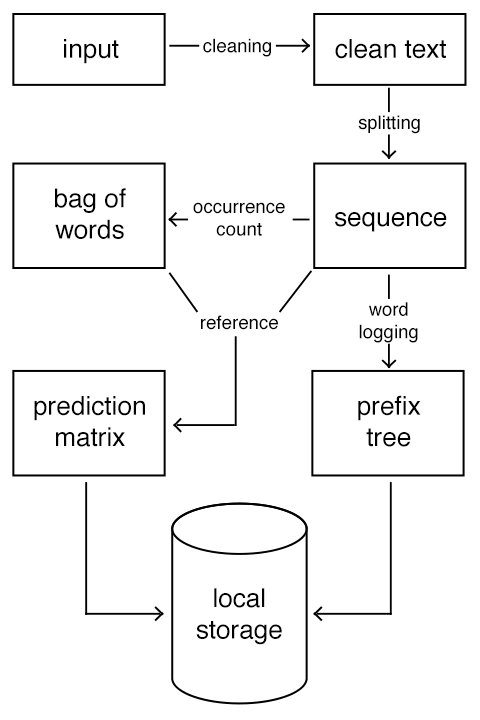
<style>
.page{position:relative;width:480px;height:720px;background:#ffffff}
.page>*{position:absolute;margin:0}
.t1{font:26.2px "Helvetica";color:#000000}
.t2{font:18.7px "Helvetica";color:#000000}
</style>
<div class="page">
<p class="t1" style="left:64px;top:39px;width:55px;height:25px">input</p>
<p class="t2" style="left:203px;top:38px;width:68px;height:19px">cleaning</p>
<p class="t1" style="left:335px;top:39px;width:111px;height:20px">clean text</p>
<p class="t2" style="left:358px;top:115px;width:62px;height:19px">splitting</p>
<p class="t1" style="left:55px;top:188px;width:71px;height:51px;text-align:center">bag of<br>words</p>
<p class="t2" style="left:193px;top:202px;width:92px;height:34px;text-align:center">occurrence<br>count</p>
<p class="t1" style="left:335px;top:212px;width:112px;height:20px">sequence</p>
<p class="t2" style="left:359px;top:302px;width:59px;height:41px;text-align:center">word<br>logging</p>
<p class="t2" style="left:201px;top:315px;width:77px;height:15px">reference</p>
<p class="t1" style="left:34px;top:396px;width:111px;height:51px;text-align:center">prediction<br>matrix</p>
<p class="t1" style="left:358px;top:395px;width:63px;height:52px;text-align:center">prefix<br>tree</p>
<p class="t1" style="left:196px;top:588px;width:86px;height:57px;text-align:center">local<br>storage</p>
</div>
